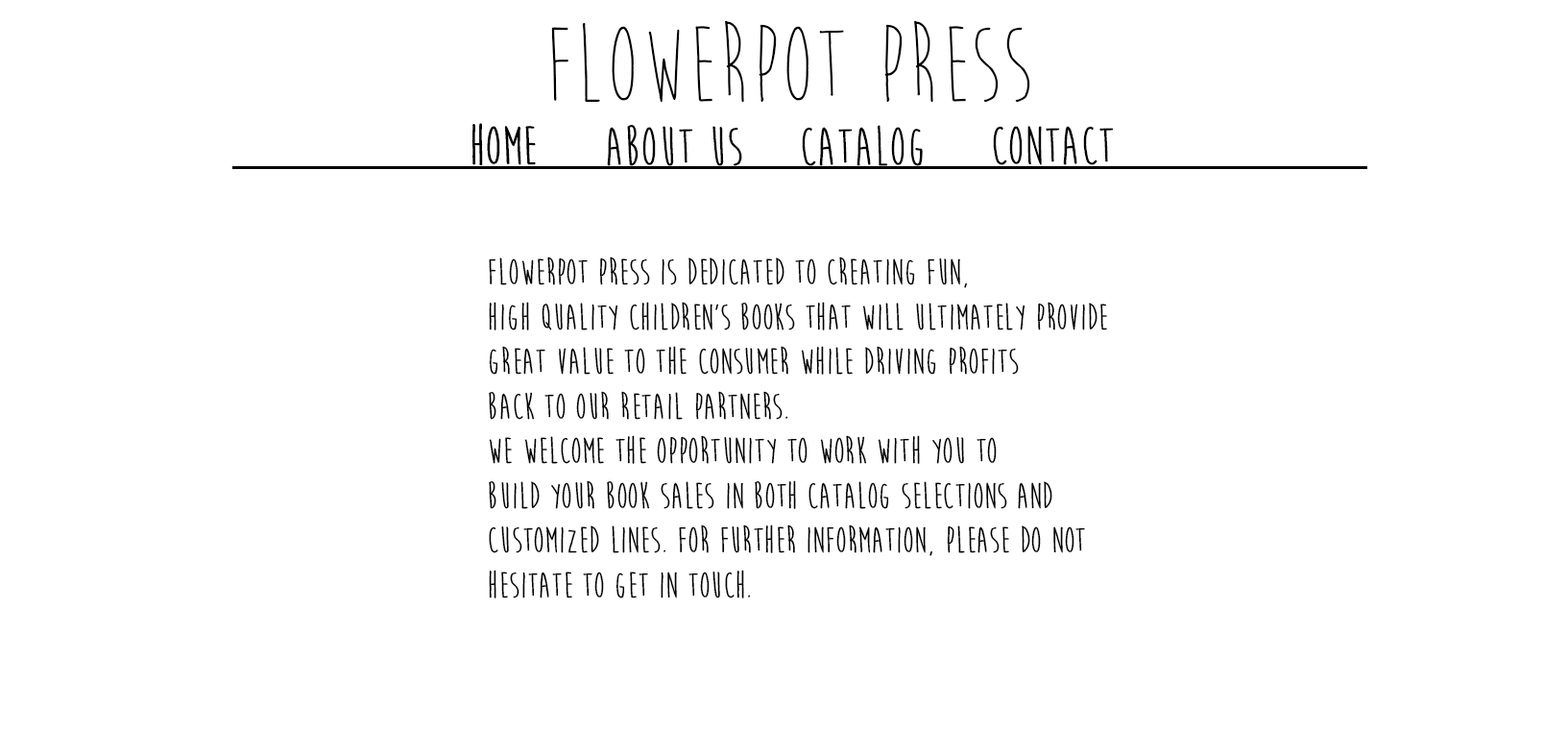
<style>
.page{position:relative;width:1568px;height:755px;background:#ffffff}
.page>*{position:absolute;margin:0}
.t1{font:112px "MoonFlower";color:#000000}
.t2{font:56px "MoonFlower";color:#000000}
.t3{font:56px "MoonFlowerBold";color:#000000}
.t4{font:37.2px "MoonFlowerBold";color:#000000}
</style>
<div class="page">
<p class="t1" style="left:551px;top:20px;width:479px;height:82px">FlowerPot Press</p>
<p class="t2" style="left:471px;top:123px;width:64px;height:42px">Home</p>
<p class="t3" style="left:472px;top:123px;width:64px;height:43px">Home</p>
<p class="t3" style="left:607px;top:125px;width:135px;height:41px">About Us</p>
<p class="t3" style="left:802px;top:125px;width:121px;height:41px">Catalog</p>
<p class="t3" style="left:993px;top:126px;width:121px;height:39px">Contact</p>
<p class="t4" style="left:489px;top:256px;width:618px;height:342px">Flowerpot Press is dedicated to creating fun, <br>high quality Children’s Books that will ultimately provide <br>great value to the consumer while driving profits <br>back to our retail partners. <br>We welcome the opportunity to work with you to <br>build your book sales in both catalog selections and <br>customized lines. For further information, please do not<br>hesitate to get in touch.</p>
</div>
